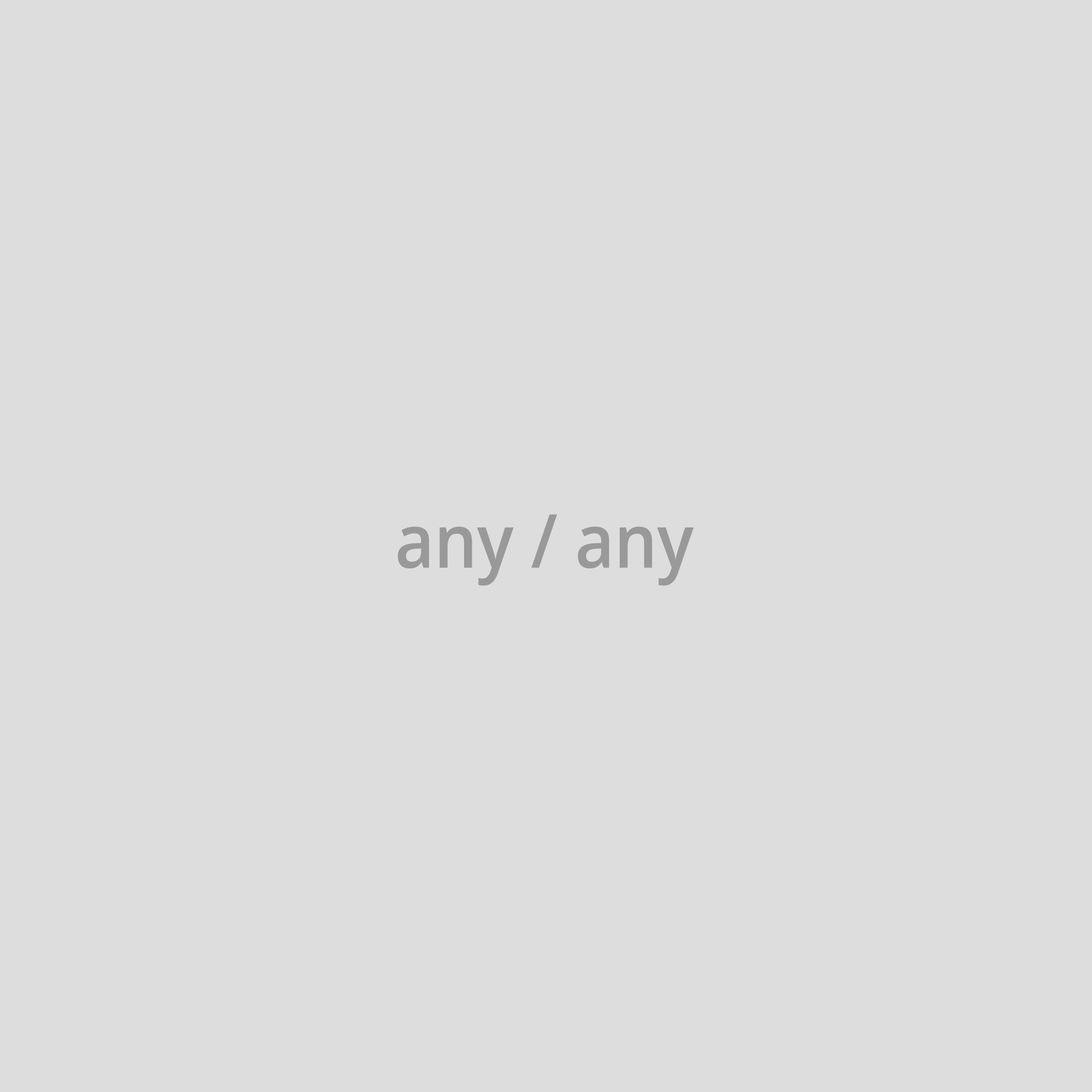
<style>
.page{position:relative;width:1092px;height:1092px;background:#dddddd}
.page>*{position:absolute;margin:0}
.t1{font:74.4px "OpenSans-Semibold";color:#999999;scale:0.91 1}
</style>
<div class="page">
<p class="t1" style="left:397px;top:514px;width:297px;height:72px">any / any</p>
</div>
